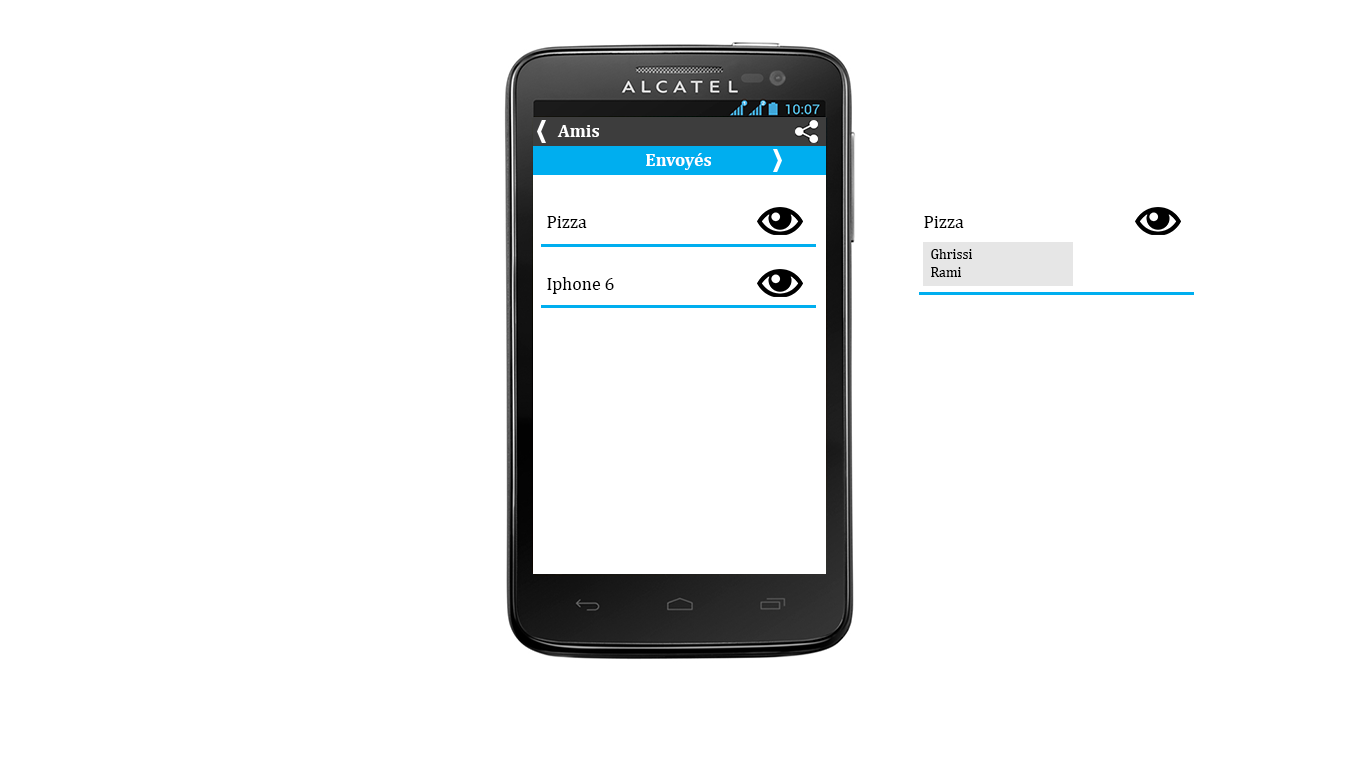
<style>
.page{position:relative;width:1366px;height:768px;background:#ffffff}
.page>*{position:absolute;margin:0}
.t1{font:18px "Cambria-Bold";color:#ffffff}
.t2{font:18px "Cambria";color:#000000}
.t3{font:14px "Cambria";color:#000000}
</style>
<div class="page">
<p class="t1" style="left:557px;top:125px;width:42px;height:12px">Amis</p>
<p class="t1" style="left:646px;top:153px;width:65px;height:17px">Envoyés</p>
<p class="t2" style="left:547px;top:216px;width:40px;height:12px">Pizza</p>
<p class="t2" style="left:924px;top:216px;width:40px;height:12px">Pizza</p>
<p class="t3" style="left:931px;top:249px;width:41px;height:10px">Ghrissi</p>
<p class="t3" style="left:931px;top:267px;width:30px;height:10px">Rami</p>
<p class="t2" style="left:547px;top:277px;width:67px;height:17px">Iphone 6</p>
</div>
